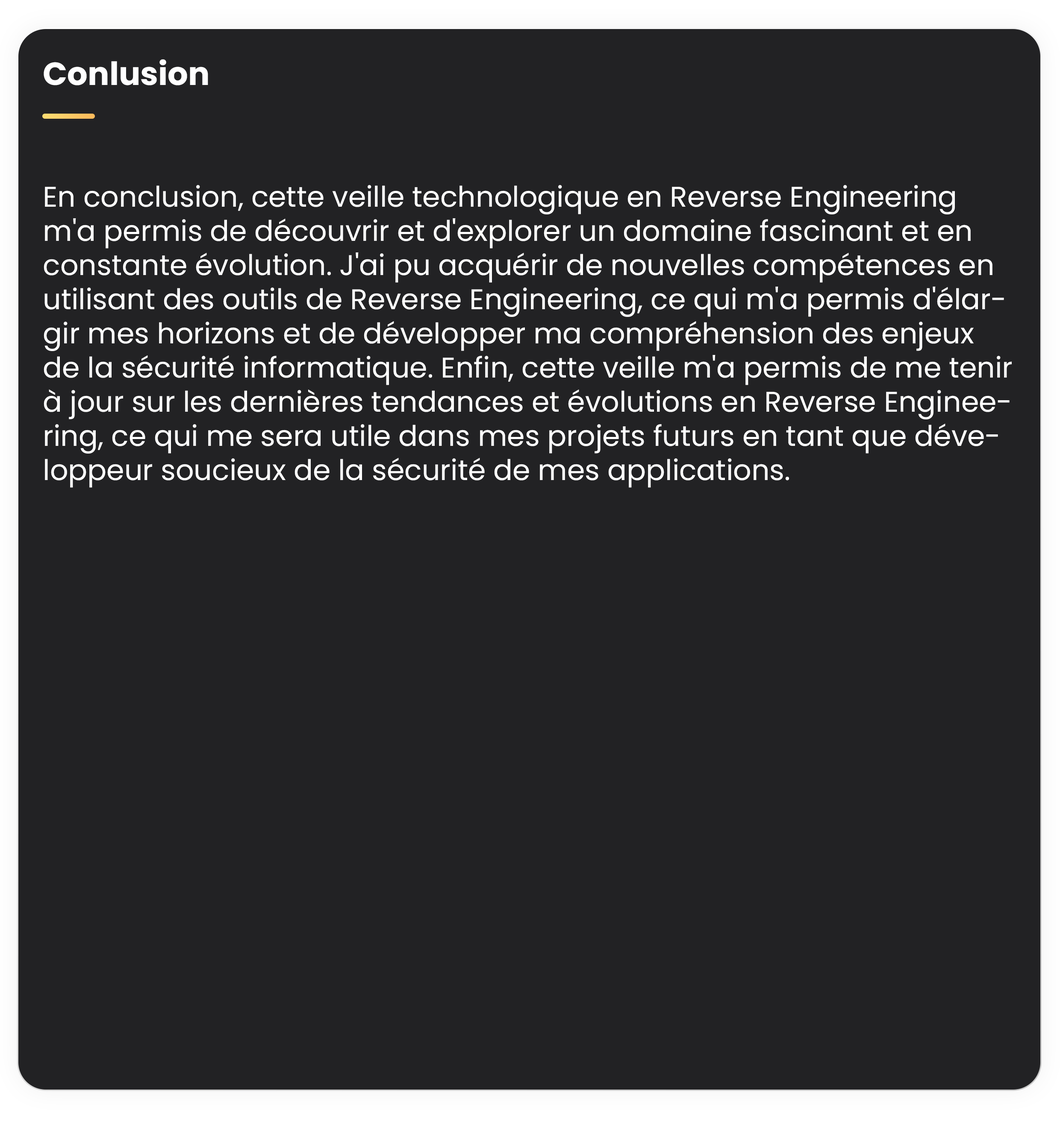
<style>
.page{position:relative;width:1060px;height:1125px;background:#222224}
.page>*{position:absolute;margin:0}
.t1{font:32px "Poppins-Bold";color:#ffffff}
.t2{font:28.5px "Poppins-Regular";color:#ffffff}
</style>
<div class="page">
<p class="t1" style="left:44px;top:59px;width:164px;height:26px">Conlusion</p>
<p class="t2" style="left:44px;top:185px;width:967px;height:303px">En conclusion, cette veille technologique en Reverse Engineering m'a permis de découvrir et d'explorer un domaine fascinant et en constante évolution. J'ai pu acquérir de nouvelles compétences en utilisant des outils de Reverse Engineering, ce qui m'a permis d'élargir mes horizons et de développer ma compréhension des enjeux de la sécurité informatique. Enfin, cette veille m'a permis de me tenir à jour sur les dernières tendances et évolutions en Reverse Engineering, ce qui me sera utile dans mes projets futurs en tant que développeur soucieux de la sécurité de mes applications.</p>
</div>
